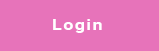
<style>
.page{position:relative;width:159px;height:51px;background:#e773ba}
.page>*{position:absolute;margin:0}
.t1{font:15.4px "Roboto-Bold";letter-spacing:0.08em;color:#ffffff;scale:1.16 1}
</style>
<div class="page">
<p class="t1" style="left:53px;top:19px;width:49px;height:14px">Login</p>
</div>
